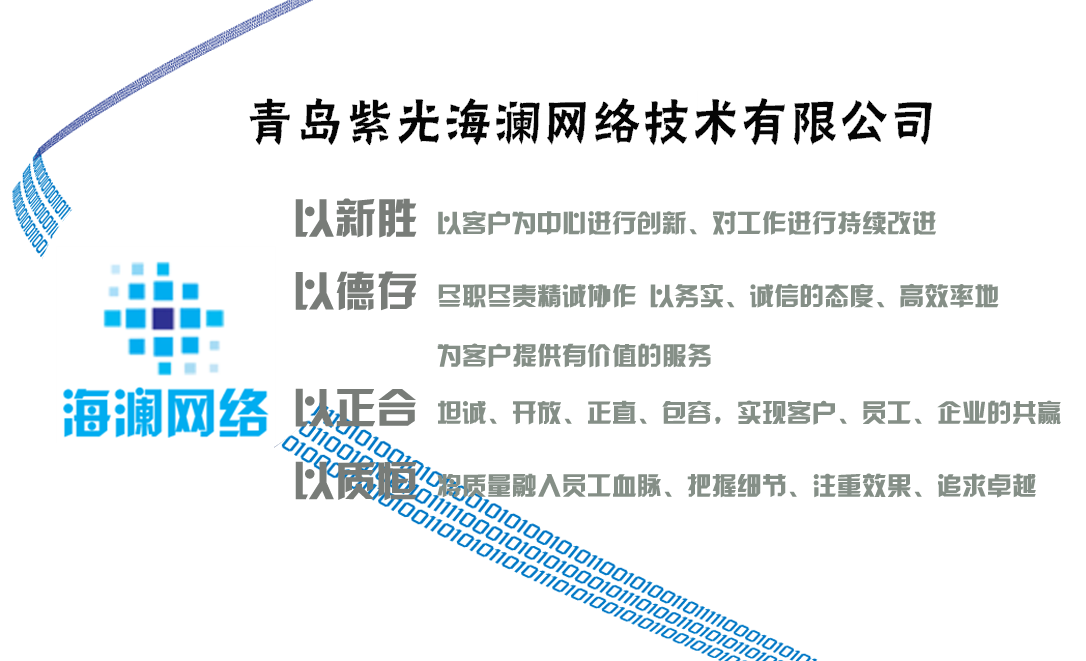
<style>
.page{position:relative;width:1086px;height:661px;background:#ffffff}
.page>*{position:absolute;margin:0}
.t1{font:25px "HYk2gj";color:#858f87}
.t2{font:41.7px "HYk2gj";color:#787c78}
</style>
<div class="page">
<p class="t1" style="left:295px;top:198px;width:766px;height:303px"><span class="t2">以新胜 </span>以客户为中心进行创新、对工作进行持续改进<br><span class="t2">以德存 </span>尽职尽责精诚协作 以务实、诚信的态度、高效率地<br>    为客户提供有价值的服务<br><span class="t2">以正合 </span>坦诚、开放、正直、包容，实现客户、员工、企业的共赢<br><span class="t2">以质恒 </span>将质量融入员工血脉、把握细节、注重效果、追求卓越</p>
</div>
